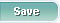
<style>
.page{position:relative;width:60px;height:23px}
.page>*{position:absolute;margin:0}
.t1{font:10.7px "Arial-BoldMT";letter-spacing:0.025em;color:#fdfdfd}
</style>
<div class="page">
<p class="t1" style="left:14px;top:7px;width:25px;height:8px">Save</p>
</div>
